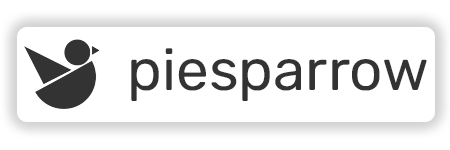
<style>
.page{position:relative;width:450px;height:150px;background:#ffffff}
.page>*{position:absolute;margin:0}
.t1{font:58.3px "Rubik-Regular";color:#333333}
</style>
<div class="page">
<p class="t1" style="left:131px;top:48px;width:296px;height:53px">piesparrow</p>
</div>
